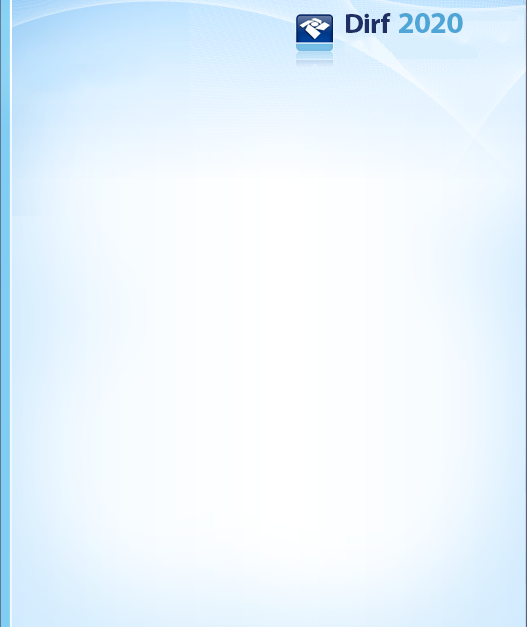
<style>
.page{position:relative;width:527px;height:627px}
.page>*{position:absolute;margin:0}
.t1{font:27.6px "MyriadPro-Bold";letter-spacing:-0.02em;color:#1f2f63}
.t2{font:30.7px "MyriadPro-Bold";letter-spacing:-0.02em;color:#4fa5d6}
</style>
<div class="page">
<p class="t1" style="left:346px;top:13px;width:45px;height:20px">Dirf</p>
<p class="t2" style="left:399px;top:13px;width:64px;height:20px">2020</p>
</div>
